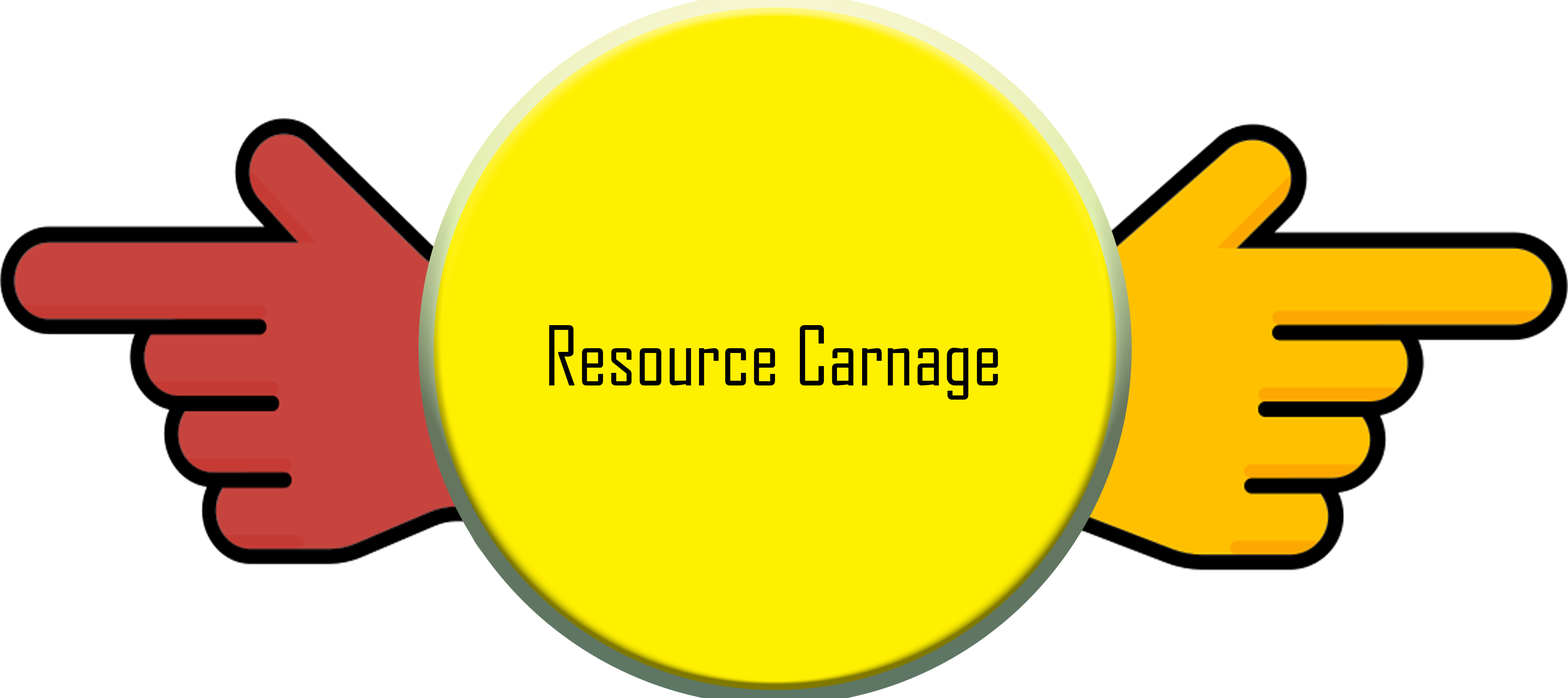
<style>
.page{position:relative;width:1568px;height:698px;background:#ffffff}
.page>*{position:absolute;margin:0}
.t1{font:78.7px "AgencyFB-Reg";color:#000000}
</style>
<div class="page">
<p class="t1" style="left:549px;top:325px;width:449px;height:75px">Resource Carnage</p>
</div>
